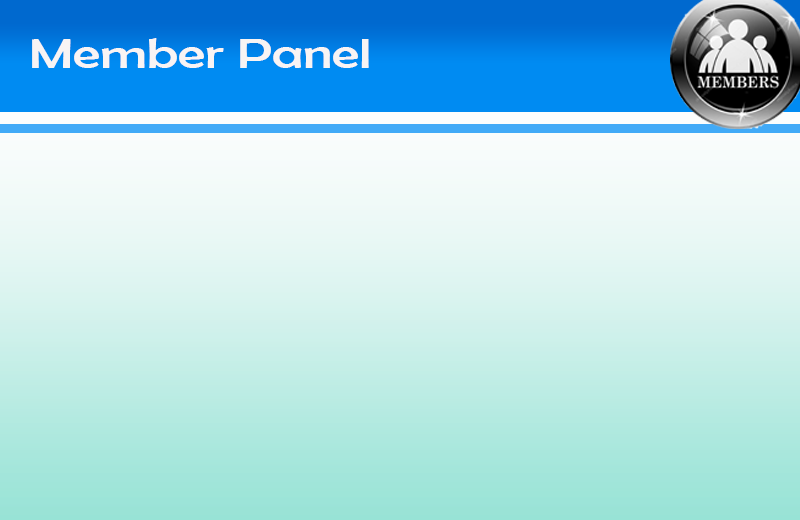
<style>
.page{position:relative;width:800px;height:520px}
.page>*{position:absolute;margin:0}
.t1{font:42.3px "BerlinSansFB-Reg";color:#f8f4f4;scale:1.32 1}
</style>
<div class="page">
<p class="t1" style="left:32px;top:38px;width:337px;height:30px">Member Panel</p>
</div>
